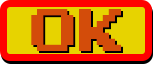
<style>
.page{position:relative;width:153px;height:64px;background:#e7d300}
.page>*{position:absolute;margin:0}
.t1{font:47.7px "PressStartReg";color:#d34c0a}
</style>
<div class="page">
<p class="t1" style="left:31px;top:9px;width:90px;height:42px">OK</p>
<p class="t1" style="left:33px;top:11px;width:90px;height:42px">OK</p>
</div>
